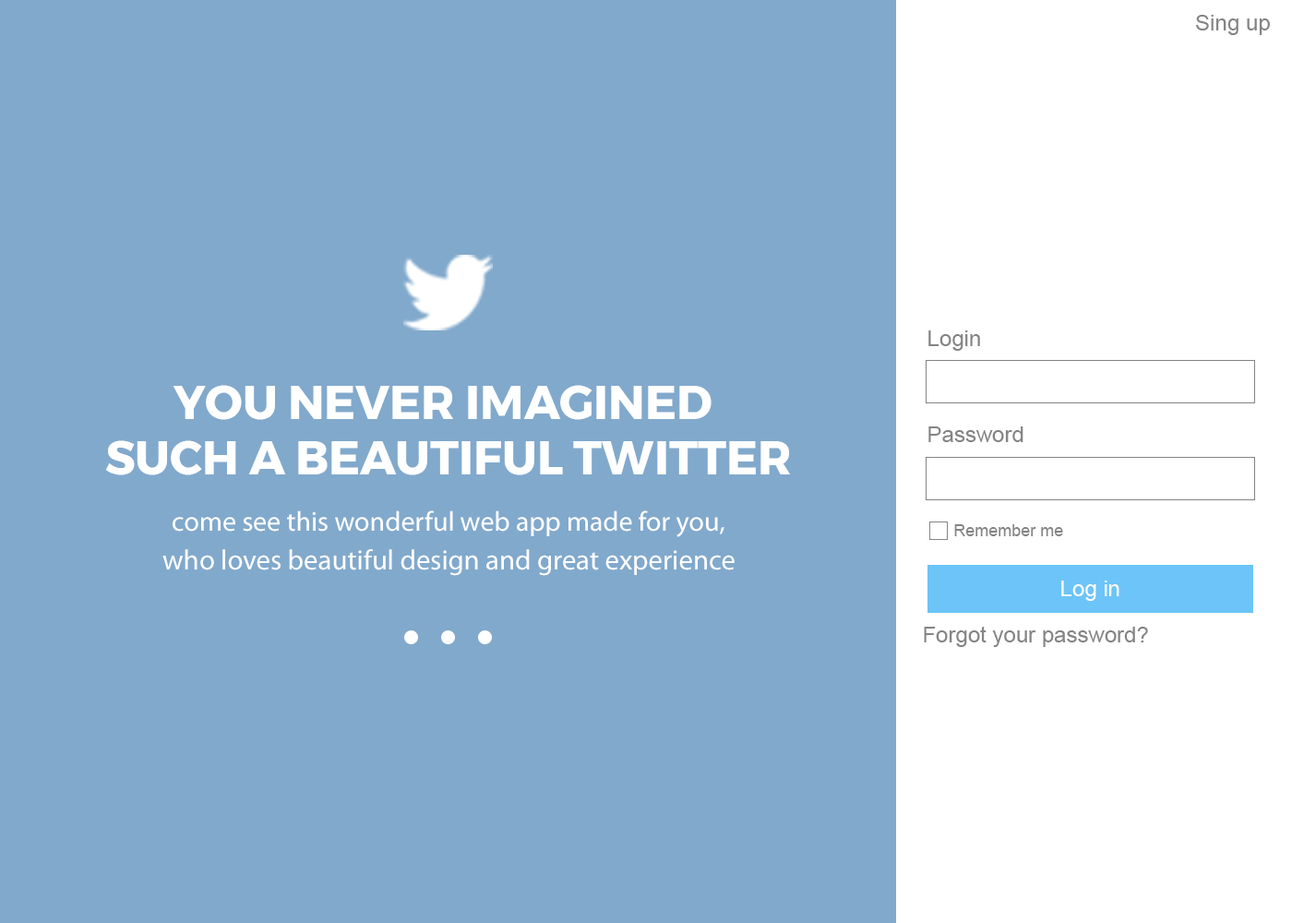
<style>
.page{position:relative;width:1292px;height:923px;background:#81a9cc}
.page>*{position:absolute;margin:0}
.t1{font:22.1px "ArialMT";color:#848484}
.t2{font:46.6px/55.4px "Montserrat-Bold";color:#ffffff;text-transform:uppercase}
.t3{font:27.7px "MyriadPro-Regular";color:#ffffff}
.t4{font:16.6px "ArialMT";color:#848484}
.t5{font:28.4px "MyriadPro-Regular";color:#ffffff}
.t6{font:22.1px "ArialMT";color:#ffffff}
</style>
<div class="page">
<p class="t1" style="left:1196px;top:15px;width:74px;height:20px">Sing up</p>
<p class="t1" style="left:928px;top:330px;width:52px;height:21px">Login</p>
<p class="t2" style="left:105px;top:385px;width:686px;height:90px;text-align:center">You never imagined <br>such a beautiful Twitter</p>
<p class="t1" style="left:928px;top:426px;width:95px;height:16px">Password</p>
<p class="t3" style="left:173px;top:510px;width:551px;height:27px">come see this wonderful web app made for you,</p>
<p class="t4" style="left:954px;top:524px;width:109px;height:12px">Remember me</p>
<p class="t5" style="left:162px;top:549px;width:573px;height:27px">who loves beautiful design and great experience</p>
<p class="t6" style="left:1061px;top:581px;width:58px;height:20px">Log in</p>
<p class="t1" style="left:924px;top:626px;width:224px;height:21px">Forgot your password?</p>
</div>
